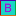
<style>
.page{position:relative;width:16px;height:16px;background:#19d6c6}
.page>*{position:absolute;margin:0}
.t1{font:12px "AcuminConcept-Regular";color:#8e19d6}
</style>
<div class="page">
<p class="t1" style="left:5px;top:3px;width:7px;height:10px">B</p>
</div>
